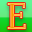
<style>
.page{position:relative;width:32px;height:32px}
.page>*{position:absolute;margin:0}
.t1{font:36px "LucidaFax"}
</style>
<div class="page">
<p class="t1" style="left:7px;top:3px;width:19px;height:26px">E</p>
</div>
